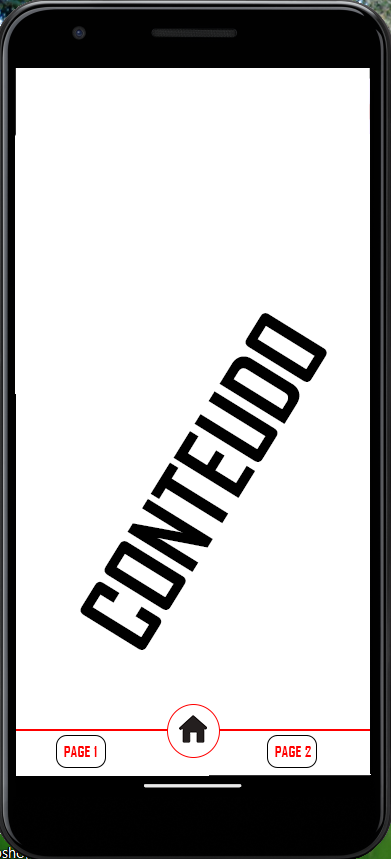
<style>
.page{position:relative;width:391px;height:859px;background:#ffffff}
.page>*{position:absolute;margin:0}
.t1{font:100px "AgencyFB-Bold";color:#000000;text-transform:uppercase}
.t2{font:15.3px "AgencyFB-Bold";color:#ff0000;text-transform:uppercase}
</style>
<div class="page">
<p class="t1" style="left:80px;top:313px;width:247px;height:337px;rotate:-58deg">CONTEUDO</p>
<p class="t2" style="left:64px;top:746px;width:33px;height:11px">PAGE 1</p>
<p class="t2" style="left:275px;top:746px;width:36px;height:11px">PAGE 2</p>
</div>
